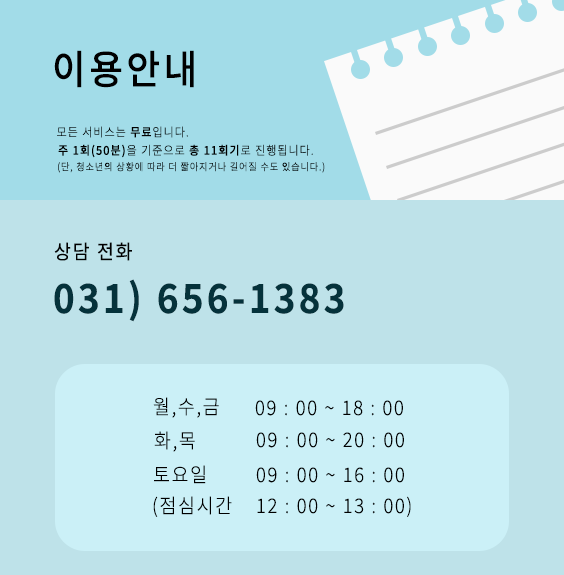
<style>
.page{position:relative;width:564px;height:575px;background:#bee2e9}
.page>*{position:absolute;margin:0}
.t1{font:40px "NotoSansKR-Medium";letter-spacing:0.09em;color:#000000;scale:0.92 1}
.t2{font:12px "NotoSansKR-Light";letter-spacing:0.09em;color:#000000;scale:0.92 1}
.t3{font:12px "NotoSansKR-Medium";letter-spacing:0.09em;color:#000000;scale:0.92 1}
.t4{font:10px "NotoSansKR-Light";letter-spacing:0.09em;color:#000000;scale:0.92 1}
.t5{font:20px "NotoSansKR-Regular";letter-spacing:0.09em;color:#000000;scale:0.92 1}
.t6{font:40px "NotoSansKR-Bold";letter-spacing:0.09em;color:#05323b;scale:0.92 1}
.t7{font:20px "NotoSansKR-Light";letter-spacing:0.09em;color:#000000;scale:0.92 1}
</style>
<div class="page">
<p class="t1" style="left:54px;top:50px;width:140px;height:38px">이용안내</p>
<p class="t2" style="left:57px;top:126px;width:131px;height:12px">모든 서비스는 <span class="t3">무료</span>입니다.</p>
<p class="t3" style="left:58px;top:144px;width:255px;height:14px">주 1회(50분)<span class="t2">을 기준으로 </span>총 11회기<span class="t2">로 진행됩니다.</span></p>
<p class="t4" style="left:58px;top:162px;width:267px;height:11px">(단, 청소년의 상황에 따라 더 짧아지거나 길어질 수도 있습니다.)</p>
<p class="t5" style="left:54px;top:242px;width:78px;height:19px">상담 전화</p>
<p class="t6" style="left:54px;top:279px;width:290px;height:43px">031) 656-1383</p>
<p class="t7" style="left:153px;top:397px;width:66px;height:21px">월,수,금</p>
<p class="t7" style="left:255px;top:400px;width:148px;height:16px">09 : 00 ~ 18 : 00</p>
<p class="t7" style="left:154px;top:431px;width:41px;height:21px">화,목</p>
<p class="t7" style="left:256px;top:432px;width:148px;height:16px">09 : 00 ~ 20 : 00</p>
<p class="t7" style="left:154px;top:465px;width:52px;height:19px">토요일</p>
<p class="t7" style="left:256px;top:467px;width:148px;height:16px">09 : 00 ~ 16 : 00</p>
<p class="t7" style="left:153px;top:496px;width:79px;height:21px">(점심시간</p>
<p class="t7" style="left:257px;top:496px;width:154px;height:21px">12 : 00 ~ 13 : 00)</p>
</div>
